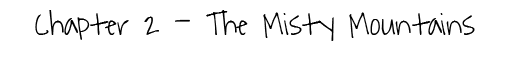
<style>
.page{position:relative;width:512px;height:64px;background:#ffffff}
.page>*{position:absolute;margin:0}
.t1{font:33.3px "WaitingfortheSunrise";color:#000000}
</style>
<div class="page">
<p class="t1" style="left:35px;top:10px;width:440px;height:31px">Chapter 2 - The Misty Mountains</p>
</div>
